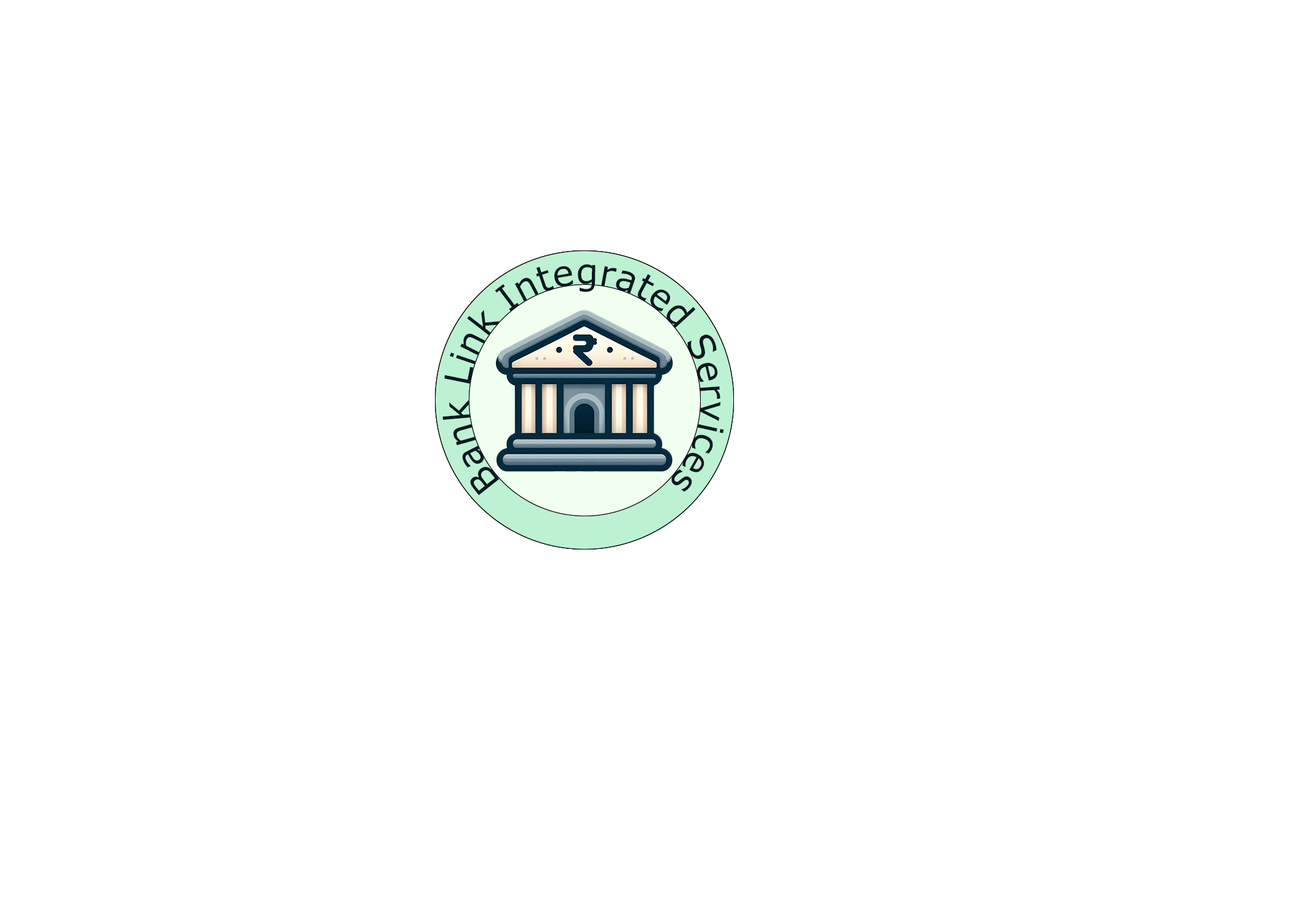
<style>
.page{position:relative;width:1292px;height:923px;background:#ffffff}
.page>*{position:absolute;margin:0}
.t1{font:35.9px "Verdana";color:#0b1721}
</style>
<div class="page">
<p class="t1" style="left:442px;top:264px;width:282px;height:231px">Bank Link Integrated Services</p>
<p class="t1" style="left:442px;top:264px;width:282px;height:231px">Bank Link Integrated Services</p>
</div>
